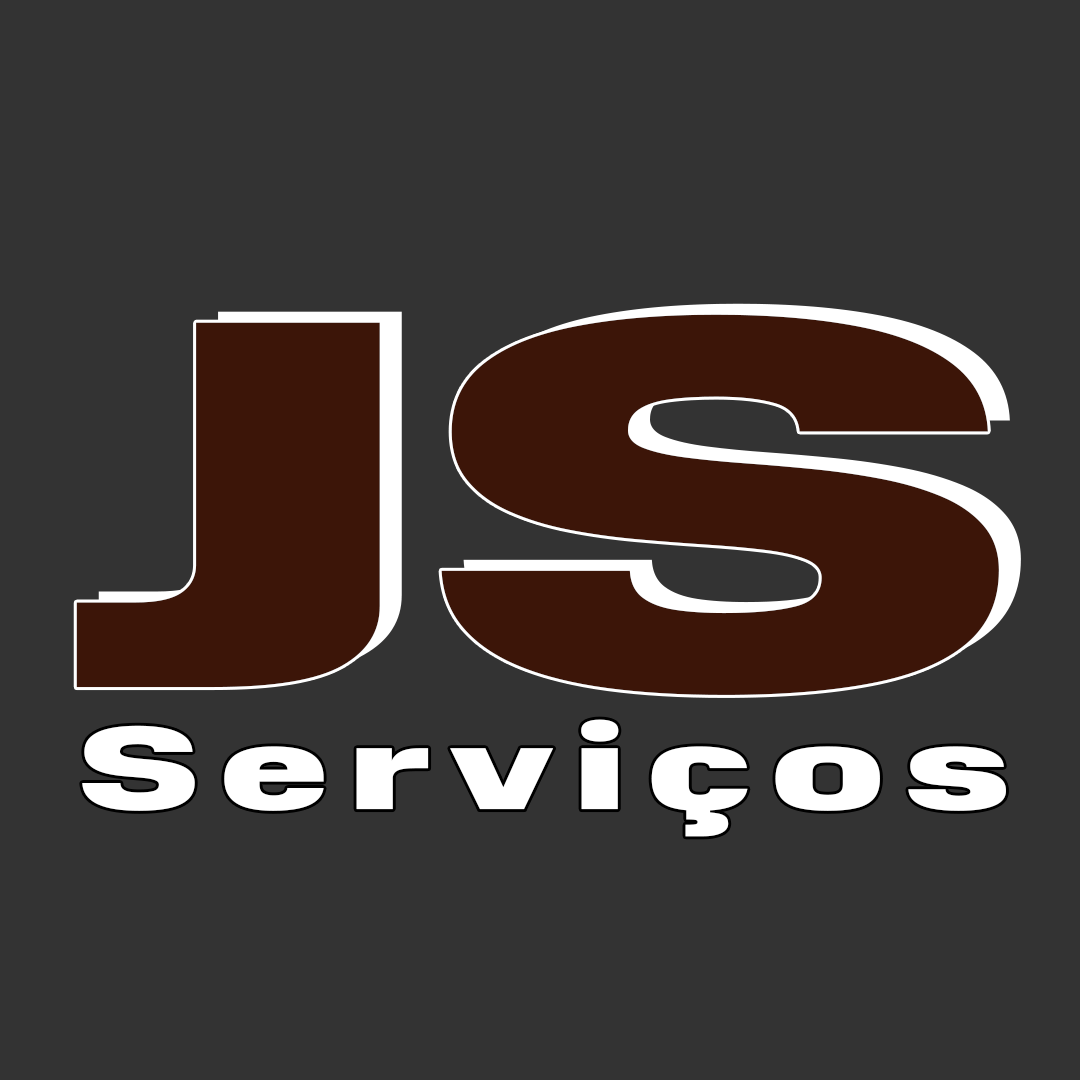
<style>
.page{position:relative;width:1080px;height:1080px;background:#333333}
.page>*{position:absolute;margin:0}
.t1{font:527.5px "NormalidadCompact-Black";letter-spacing:-0.02em;color:#3c1508;scale:1.74 1}
.t2{font:117.9px "NormalidadCompact-Black";letter-spacing:0.1em;color:#ffffff;scale:1.57 1}
</style>
<div class="page">
<p class="t1" style="left:76px;top:314px;width:923px;height:381px">JS</p>
<p class="t2" style="left:82px;top:719px;width:924px;height:118px">Serviços</p>
</div>
